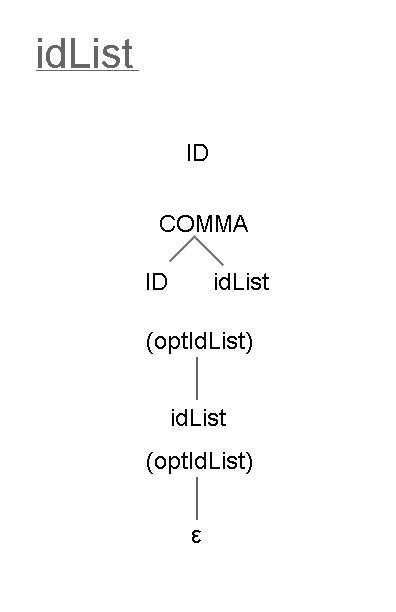
<style>
.page{position:relative;width:396px;height:612px;background:#ffffff}
.page>*{position:absolute;margin:0}
.t1{font:42px "ArialMT";color:#666666}
.t2{font:12px "ArialMT";color:#000000}
</style>
<div class="page">
<p class="t1" style="left:38px;top:38px;width:95px;height:30px">idList</p>
<p class="t2" style="left:188px;top:144px;width:20px;height:17px">ID</p>
<p class="t2" style="left:160px;top:215px;width:88px;height:17px">COMMA</p>
<p class="t2" style="left:147px;top:273px;width:20px;height:17px">ID</p>
<p class="t2" style="left:215px;top:273px;width:54px;height:17px">idList</p>
<p class="t2" style="left:147px;top:332px;width:105px;height:22px">(optIdList)</p>
<p class="t2" style="left:172px;top:409px;width:54px;height:17px">idList</p>
<p class="t2" style="left:147px;top:452px;width:105px;height:22px">(optIdList)</p>
<p class="t2" style="left:192px;top:530px;width:9px;height:13px">ε</p>
</div>
